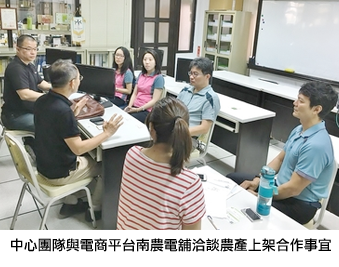
<style>
.page{position:relative;width:339px;height:267px}
.page>*{position:absolute;margin:0}
.t1{font:14px "LiHeiPro";color:#000000}
</style>
<div class="page">
<p class="t1" style="left:11px;top:238px;width:320px;height:14px">中心團隊與電商平台南農電舖洽談農產上架合作事宜</p>
</div>
